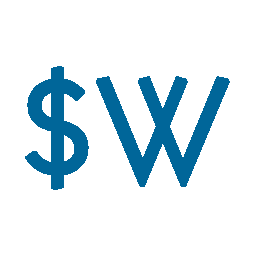
<style>
.page{position:relative;width:256px;height:256px;background:#ffffff}
.page>*{position:absolute;margin:0}
.t1{font:150px "KabelITCbyBT-Book";color:#006699;font-weight:bold}
</style>
<div class="page">
<p class="t1" style="left:25px;top:66px;width:205px;height:124px">$W</p>
</div>
